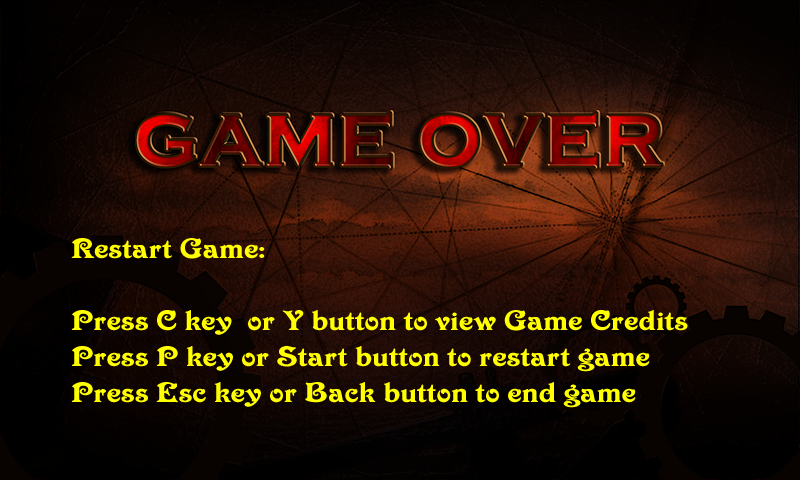
<style>
.page{position:relative;width:800px;height:480px}
.page>*{position:absolute;margin:0}
.t1{font:30px "VictorianStd";color:#ffff00;scale:1.25 1}
</style>
<div class="page">
<p class="t1" style="left:71px;top:238px;width:617px;height:170px">Restart Game:  <br><br>Press C key  or Y button to view Game Credits<br>Press P key or Start button to restart game<br>Press Esc key or Back button to end game</p>
</div>
